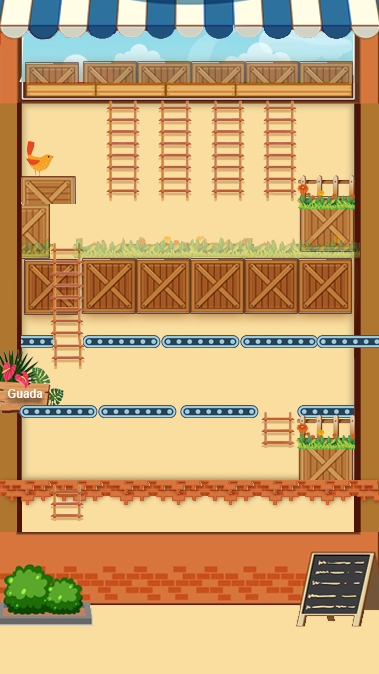
<style>
.page{position:relative;width:379px;height:674px;background:#f9de9f}
.page>*{position:absolute;margin:0}
.t1{font:11.6px "Arial-BoldMT";color:#ffffff}
</style>
<div class="page">
<p class="t1" style="left:7px;top:389px;width:36px;height:9px">Guada</p>
</div>
